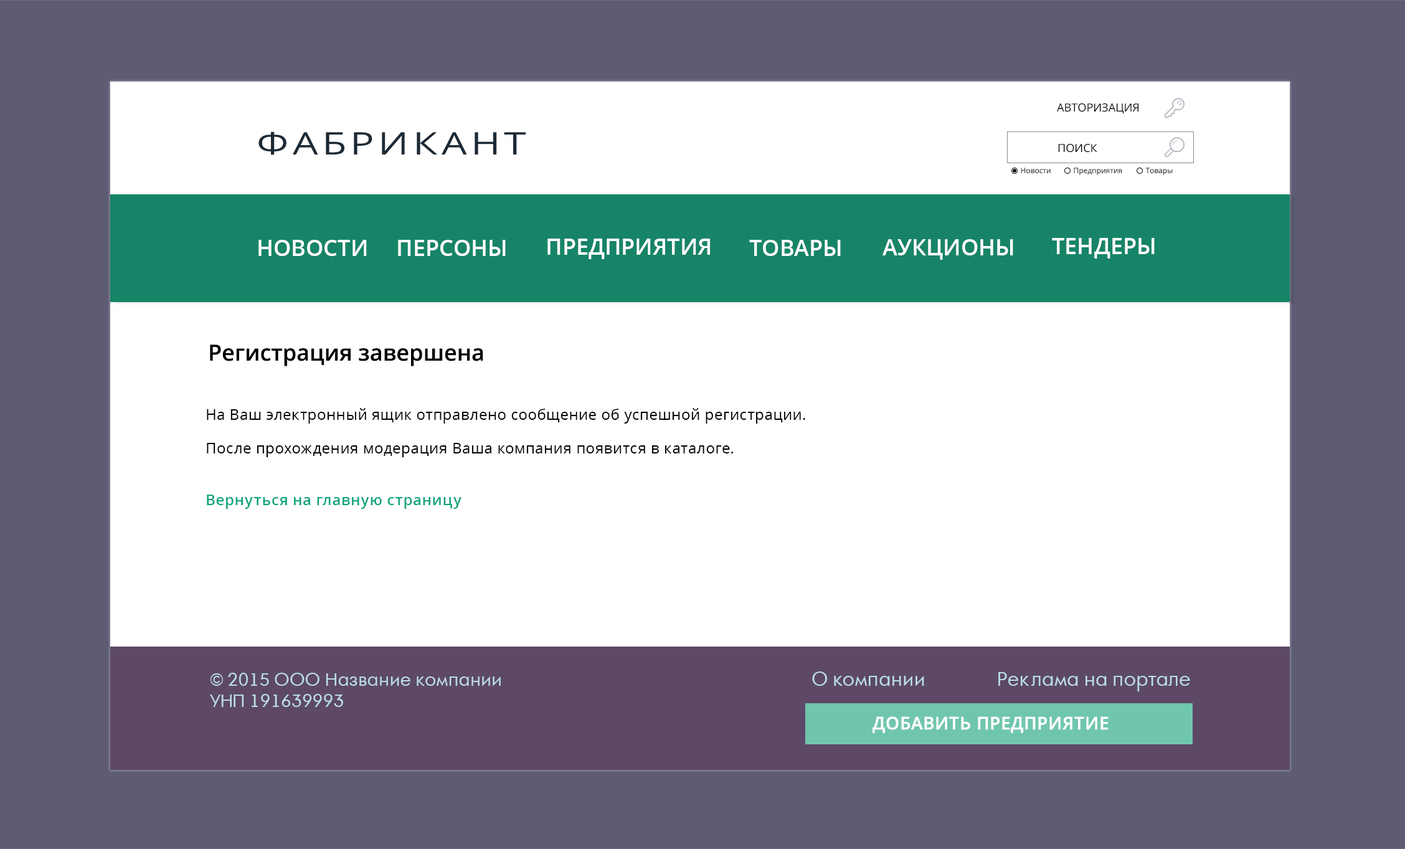
<style>
.page{position:relative;width:1405px;height:849px;background:#ffffff}
.page>*{position:absolute;margin:0}
.t1{font:11.2px "OpenSans";color:#000000;text-transform:uppercase}
.t2{font:31.1px "OpenSans";letter-spacing:0.1em;color:#1c2a36;scale:1.28 1}
.t3{font:7.5px "OpenSans";color:#404040}
.t4{font:22.4px "OpenSans-Semibold";color:#ffffff}
.t5{font:22.4px "OpenSans-Semibold";color:#000000}
.t6{font:14.9px/22.4px "OpenSans";letter-spacing:0.025em;color:#010101}
.t7{font:14.9px "OpenSans-Semibold";letter-spacing:0.025em;color:#0fa57e}
.t8{font:17.4px "AFuturaOrto";color:#bbdde3}
.t9{font:18.7px "AFuturaOrto";color:#bbdde3}
.t10{font:17.4px "OpenSans-Semibold";color:#ffffff;font-weight:bold}
</style>
<div class="page">
<p class="t1" style="left:1057px;top:103px;width:81px;height:11px">авторизация</p>
<p class="t2" style="left:258px;top:131px;width:268px;height:24px">ФАБРИКАНТ</p>
<p class="t1" style="left:1058px;top:144px;width:39px;height:9px">поиск</p>
<p class="t3" style="left:1021px;top:168px;width:30px;height:6px">Новости</p>
<p class="t3" style="left:1074px;top:168px;width:48px;height:7px">Предприятия</p>
<p class="t3" style="left:1145px;top:168px;width:28px;height:7px">Товары</p>
<p class="t4" style="left:258px;top:240px;width:109px;height:16px">НОВОСТИ</p>
<p class="t4" style="left:398px;top:240px;width:108px;height:16px">ПЕРСОНЫ</p>
<p class="t4" style="left:547px;top:239px;width:163px;height:20px">ПРЕДПРИЯТИЯ</p>
<p class="t4" style="left:749px;top:240px;width:92px;height:16px">ТОВАРЫ</p>
<p class="t4" style="left:882px;top:239px;width:131px;height:21px">АУКЦИОНЫ</p>
<p class="t4" style="left:1052px;top:238px;width:103px;height:20px">ТЕНДЕРЫ</p>
<p class="t5" style="left:210px;top:344px;width:273px;height:22px">Регистрация завершена</p>
<p class="t6" style="left:207px;top:408px;width:598px;height:49px">На Ваш электронный ящик отправлено сообщение об успешной регистрации. <br>После прохождения модерация Ваша компания появится в каталоге.</p>
<p class="t7" style="left:207px;top:494px;width:254px;height:15px">Вернуться на главную страницу</p>
<p class="t8" style="left:210px;top:673px;width:291px;height:34px">© 2015 ООО Название компании<br>УНП 191639993</p>
<p class="t9" style="left:812px;top:671px;width:112px;height:15px">О компании</p>
<p class="t9" style="left:998px;top:672px;width:192px;height:19px">Реклама на портале</p>
<p class="t10" style="left:872px;top:716px;width:236px;height:17px">ДОБАВИТЬ ПРЕДПРИЯТИЕ</p>
</div>
